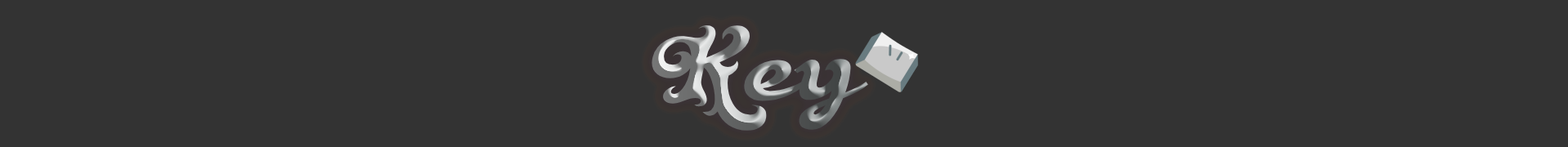
<style>
.page{position:relative;width:1568px;height:147px;background:#333333}
.page>*{position:absolute;margin:0}
.t1{font:108.8px "BlackRose";scale:1.2 1}
</style>
<div class="page">
<p class="t1" style="left:652px;top:25px;width:216px;height:106px">Key</p>
</div>
